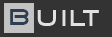
<style>
.page{position:relative;width:112px;height:37px;background:#333333}
.page>*{position:absolute;margin:0}
.t1{font:24px "GoodTimes";color:#2c3e50}
.t2{font:24px "GoodTimes";letter-spacing:0.1em;color:#e2e2e2}
</style>
<div class="page">
<p class="t1" style="left:10px;top:9px;width:19px;height:16px">B</p>
<p class="t2" style="left:37px;top:10px;width:62px;height:16px">UILT</p>
</div>
